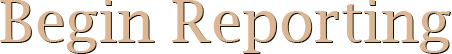
<style>
.page{position:relative;width:452px;height:54px;background:#ffffff}
.page>*{position:absolute;margin:0}
.t1{font:58.3px "LucidaBright";color:#ddb793}
</style>
<div class="page">
<p class="t1" style="left:0px;top:0px;width:451px;height:53px">Begin Reporting</p>
<p class="t1" style="left:1px;top:1px;width:451px;height:53px">Begin Reporting</p>
</div>
